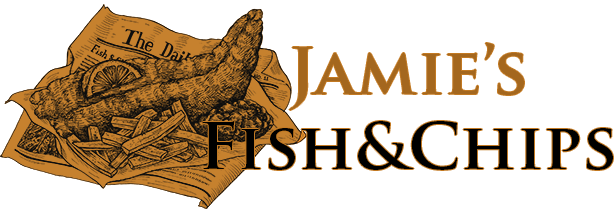
<style>
.page{position:relative;width:616px;height:213px;background:#ffffff}
.page>*{position:absolute;margin:0}
.t1{font:62.5px "TrajanPro-Bold";color:#000000;scale:1.04 1}
.t2{font:62.5px "TrajanPro-Bold";color:#a4671e;scale:1.04 1}
</style>
<div class="page">
<p class="t1" style="left:202px;top:43px;width:411px;height:127px;text-align:center"><span class="t2">Jamie’s <br></span>Fish&amp;Chips</p>
</div>
